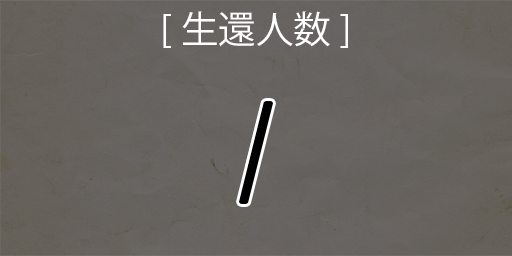
<style>
.page{position:relative;width:512px;height:256px}
.page>*{position:absolute;margin:0}
.t1{font:37.5px "KozGoPr6N-Regular";color:#ffffff}
</style>
<div class="page">
<p class="t1" style="left:163px;top:11px;width:185px;height:37px">[生還人数]</p>
</div>
